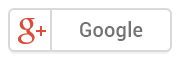
<style>
.page{position:relative;width:180px;height:60px;background:#ffffff}
.page>*{position:absolute;margin:0}
.t1{font:20px "Roboto-Medium";letter-spacing:0.01em;color:#737373}
</style>
<div class="page">
<p class="t1" style="left:80px;top:21px;width:63px;height:20px">Google</p>
</div>
